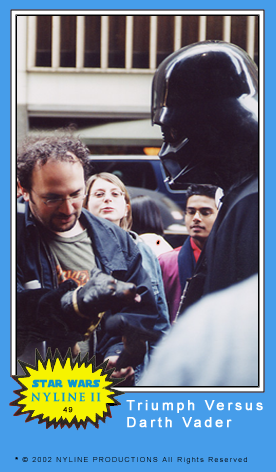
<style>
.page{position:relative;width:276px;height:472px;background:#469dea}
.page>*{position:absolute;margin:0}
.t1{font:9px "DistantGalaxySolid";color:#0b96cf;font-weight:bold}
.t2{font:8.5px "EPISODE-I";letter-spacing:0.25em;color:#0b96cf;font-weight:bold}
.t3{font:14px "ArialMT";letter-spacing:0.188em;color:#ffffff;font-weight:bold}
.t4{font:7px "ArialMT";letter-spacing:0.2em;font-weight:bold}
.t5{font:7px "ArialMT";letter-spacing:0.188em;color:#000000}
.t6{font:7px "ArialMT";letter-spacing:0.188em;color:#000000;font-weight:bold}
</style>
<div class="page">
<p class="t1" style="left:32px;top:379px;width:68px;height:9px">STAR WARS</p>
<p class="t2" style="left:31px;top:392px;width:70px;height:10px">NYLINE II</p>
<p class="t3" style="left:126px;top:400px;width:137px;height:28px">Triumph Versus<br>Darth Vader</p>
<p class="t4" style="left:63px;top:407px;width:10px;height:6px">49</p>
<p class="t5" style="left:15px;top:457px;width:232px;height:7px"><span class="t6">*</span> © 2002 NYLINE PRODUCTIONS All Rights Reserved</p>
</div>
